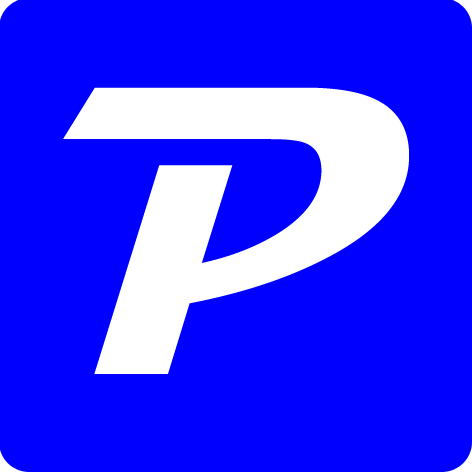
<style>
.page{position:relative;width:472px;height:472px;background:#0000ff}
.page>*{position:absolute;margin:0}
.t1{font:416.7px "Magneto-Bold";color:#ffffff}
</style>
<div class="page">
<p class="t1" style="left:63px;top:87px;width:346px;height:287px">P</p>
</div>
